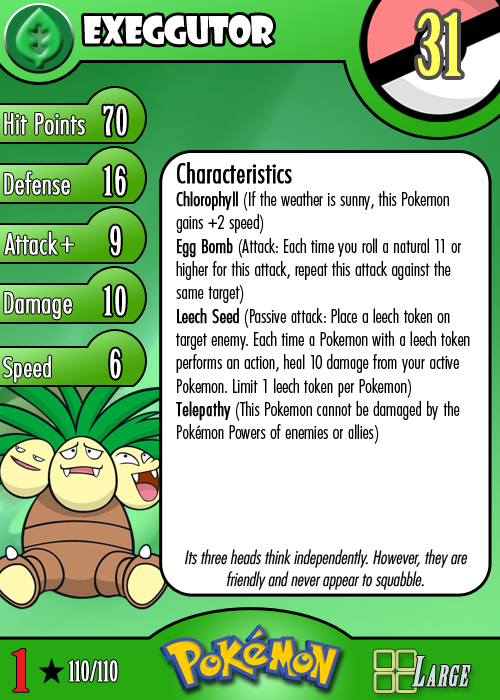
<style>
.page{position:relative;width:500px;height:700px;background:#ffffff}
.page>*{position:absolute;margin:0}
.t1{font:36.7px "ShowcardGothic-Reg";letter-spacing:-0.025em;color:#ffffff;scale:0.91 1}
.t2{font:83.3px "BirchStd";letter-spacing:0.025em;color:#fffd59;font-weight:bold}
.t3{font:27.8px "Futura-CondensedLight";color:#ffffff;font-weight:bold}
.t4{font:38.9px "BirchStd";letter-spacing:0.035em;color:#ffffff;font-weight:bold}
.t5{font:19.4px "FuturaCondensedBQ-Light";color:#010101}
.t6{font:27.8px "FuturaCondensedBQ-Light";color:#010101;font-weight:bold}
.t7{font:19.4px "FuturaCondensedBQ-Light";color:#010101;font-weight:bold}
.t8{font:30.6px "Futura-CondensedLight";color:#ffffff;font-weight:bold}
.t9{font:27.8px "FuturaCondensedBQ-Light";color:#ffffff;font-weight:bold}
.t10{font:18.1px "Futura-CondensedLight";color:#010101;font-style:italic}
.t11{font:55.6px "BirchStd";color:#ed1c24;font-weight:bold;scale:1.5 1}
.t12{font:27.8px "BirchStd";color:#ffffff;font-weight:bold}
</style>
<div class="page">
<p class="t1" style="left:84px;top:15px;width:189px;height:31px">exeggutor</p>
<p class="t2" style="left:418px;top:12px;width:43px;height:64px">31</p>
<p class="t3" style="left:4px;top:113px;width:81px;height:22px">Hit Points</p>
<p class="t4" style="left:103px;top:105px;width:24px;height:31px">70</p>
<p class="t3" style="left:4px;top:171px;width:66px;height:24px">Defense</p>
<p class="t4" style="left:104px;top:165px;width:22px;height:31px">16</p>
<p class="t5" style="left:176px;top:162px;width:294px;height:282px"><span class="t6">Characteristics<br></span><span class="t7">Chlorophyll</span> (If the weather is sunny, this Pokemon gains +2 speed)<br><span class="t7">Egg Bomb</span> (Attack: Each time you roll a natural 11 or higher for this attack, repeat this attack against the same target)<br><span class="t7">Leech Seed</span> (Passive attack: Place a leech token on target enemy. Each time a Pokemon with a leech token performs an action, heal 10 damage from your active Pokemon. Limit 1 leech token per Pokemon)<br><span class="t7">Telepathy</span> (This Pokemon cannot be damaged by the Pokémon Powers of enemies or allies)</p>
<p class="t3" style="left:4px;top:231px;width:54px;height:24px">Attack</p>
<p class="t4" style="left:110px;top:225px;width:11px;height:31px">9</p>
<p class="t8" style="left:60px;top:236px;width:14px;height:17px">+</p>
<p class="t3" style="left:4px;top:292px;width:68px;height:28px">Damage</p>
<p class="t4" style="left:104px;top:285px;width:22px;height:31px">10</p>
<p class="t4" style="left:110px;top:348px;width:11px;height:31px">6</p>
<p class="t9" style="left:3px;top:355px;width:48px;height:28px">Speed</p>
<p class="t10" style="left:185px;top:549px;width:283px;height:41px;text-align:center">Its three heads think independently. However, they are friendly and never appear to squabble.</p>
<p class="t11" style="left:12px;top:649px;width:17px;height:43px">1</p>
<p class="t12" style="left:68px;top:660px;width:50px;height:22px">110/110</p>
</div>
